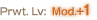
<style>
.page{position:relative;width:97px;height:20px;background:#ffffff}
.page>*{position:absolute;margin:0}
.t1{font:10px "GothicMB101Pro-DeBold";letter-spacing:-0.04em;color:#cc6719}
.t2{font:14px "GothicMB101Pro-DeBold";letter-spacing:-0.04em;color:#cc6719}
.t3{font:10px "GothicMB101Pro-DeBold";letter-spacing:-0.04em;color:#8b6e51}
</style>
<div class="page">
<p class="t1" style="left:52px;top:4px;width:37px;height:12px">Mod.+<span class="t2">1</span></p>
<p class="t3" style="left:0px;top:7px;width:46px;height:9px;opacity:0.9">Prwt. Lv:</p>
</div>
